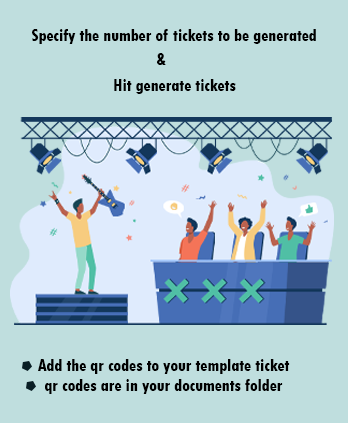
<style>
.page{position:relative;width:348px;height:423px;background:#bfdede}
.page>*{position:absolute;margin:0}
.t1{font:16.7px "TwCenMT-CondensedExtraBold";color:#000000}
</style>
<div class="page">
<p class="t1" style="left:32px;top:29px;width:284px;height:15px">Specify the number of tickets to be generated</p>
<p class="t1" style="left:157px;top:53px;width:9px;height:12px">&amp;</p>
<p class="t1" style="left:114px;top:79px;width:122px;height:15px">Hit generate tickets</p>
<p class="t1" style="left:38px;top:359px;width:252px;height:35px;text-align:center">Add the qr codes to your template ticket<br> qr codes are in your documents folder</p>
</div>
